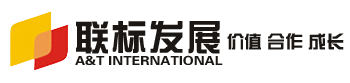
<style>
.page{position:relative;width:350px;height:83px;background:#ffffff}
.page>*{position:absolute;margin:0}
.t1{font:36px "FZZYJW--GB1-0";letter-spacing:0.05em;color:#1b1714}
.t2{font:18px "FZZYJW--GB1-0";color:#1b1714}
.t3{font:12.6px "FZZYJW--GB1-0";color:#1b1714;scale:1.11 1}
</style>
<div class="page">
<p class="t1" style="left:76px;top:21px;width:144px;height:33px">联标发展</p>
<p class="t2" style="left:227px;top:33px;width:117px;height:17px">价值 合作 成长</p>
<p class="t3" style="left:75px;top:55px;width:148px;height:10px">A&amp;T INTERNATIONAL</p>
</div>
